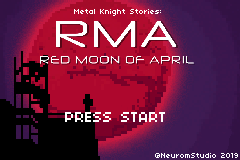
<style>
.page{position:relative;width:240px;height:160px}
.page>*{position:absolute;margin:0}
.t1{font:8px "04b03";color:#ffffff}
.t2{font:15.6px "04b03";color:#ffffff}
</style>
<div class="page">
<p class="t1" style="left:74px;top:9px;width:87px;height:7px">Metal Knight Stories:</p>
<p class="t2" style="left:65px;top:112px;width:100px;height:10px">PRESS START</p>
<p class="t1" style="left:155px;top:153px;width:83px;height:5px">@NeuromStudio 2019</p>
</div>
